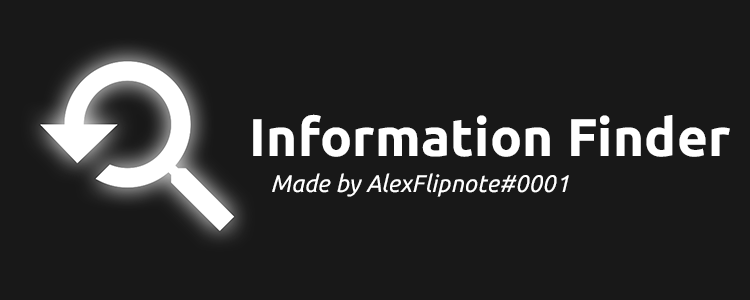
<style>
.page{position:relative;width:750px;height:300px;background:#181818}
.page>*{position:absolute;margin:0}
.t1{font:24px/36px "Ubuntu-Italic";letter-spacing:0.005em;color:#ffffff}
.t2{font:53px/36px "Ubuntu-Bold";letter-spacing:0.005em;color:#ffffff}
</style>
<div class="page">
<p class="t1" style="left:253px;top:114px;width:477px;height:83px"><span class="t2">Information Finder<br>     </span>Made by AlexFlipnote#0001</p>
</div>
